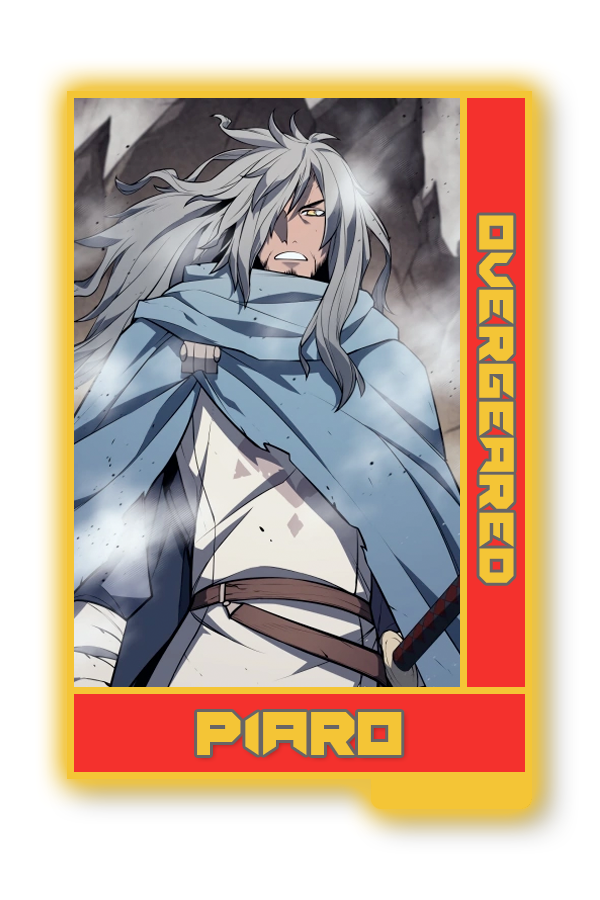
<style>
.page{position:relative;width:600px;height:900px;background:#ffffff}
.page>*{position:absolute;margin:0}
.t1{font:48.8px "Suggested-Regular";color:#f4c536}
.t2{font:62.5px "Suggested-Regular";color:#f4c536}
</style>
<div class="page">
<p class="t1" style="left:479px;top:215px;width:35px;height:368px;rotate:90deg">OVERGEARED</p>
<p class="t2" style="left:197px;top:712px;width:205px;height:43px">Piaro</p>
</div>
